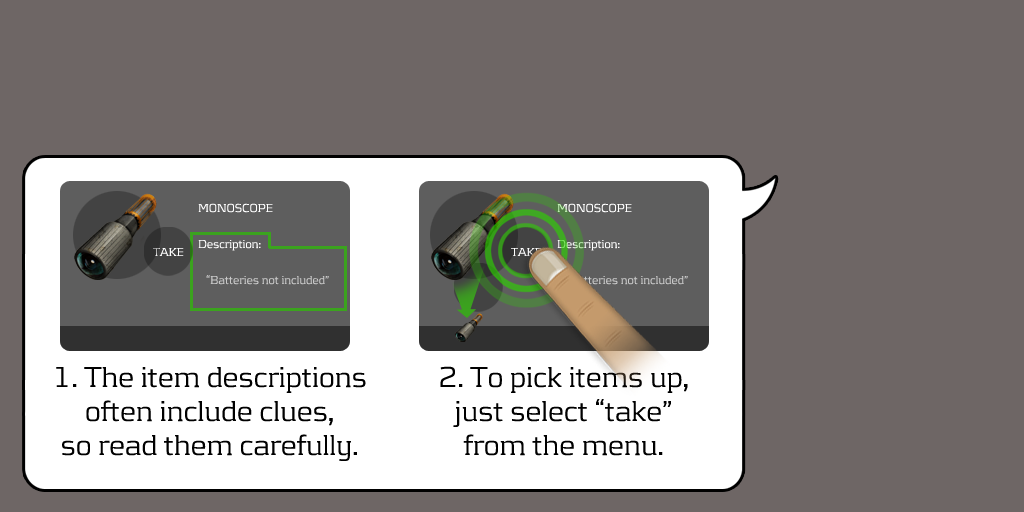
<style>
.page{position:relative;width:1024px;height:512px;background:#6e6665}
.page>*{position:absolute;margin:0}
.t1{font:12px/36px "KontrapunktLight";color:#c9c9c9}
.t2{font:12px/36px "KontrapunktLight";color:#ffffff}
.t3{font:12px "KontrapunktLight";color:#ffffff}
.t4{font:30px/34px "KontrapunktLight";color:#000000}
</style>
<div class="page">
<p class="t1" style="left:198px;top:203px;width:131px;height:82px"><span class="t2">MONOSCOPE<br>Description:<br></span>   “Batteries not included”</p>
<p class="t1" style="left:557px;top:203px;width:131px;height:82px"><span class="t2">MONOSCOPE<br>Description:<br></span>   “Batteries not included”</p>
<p class="t3" style="left:153px;top:248px;width:31px;height:8px">TAKE</p>
<p class="t3" style="left:511px;top:248px;width:31px;height:8px">TAKE</p>
<p class="t4" style="left:440px;top:366px;width:248px;height:90px;text-align:center">2. To pick items up, <br>just select “take” <br>from the menu.</p>
<p class="t4" style="left:56px;top:367px;width:310px;height:94px;text-align:center">1. The item descriptions often include clues, <br>so read them carefully.</p>
</div>
